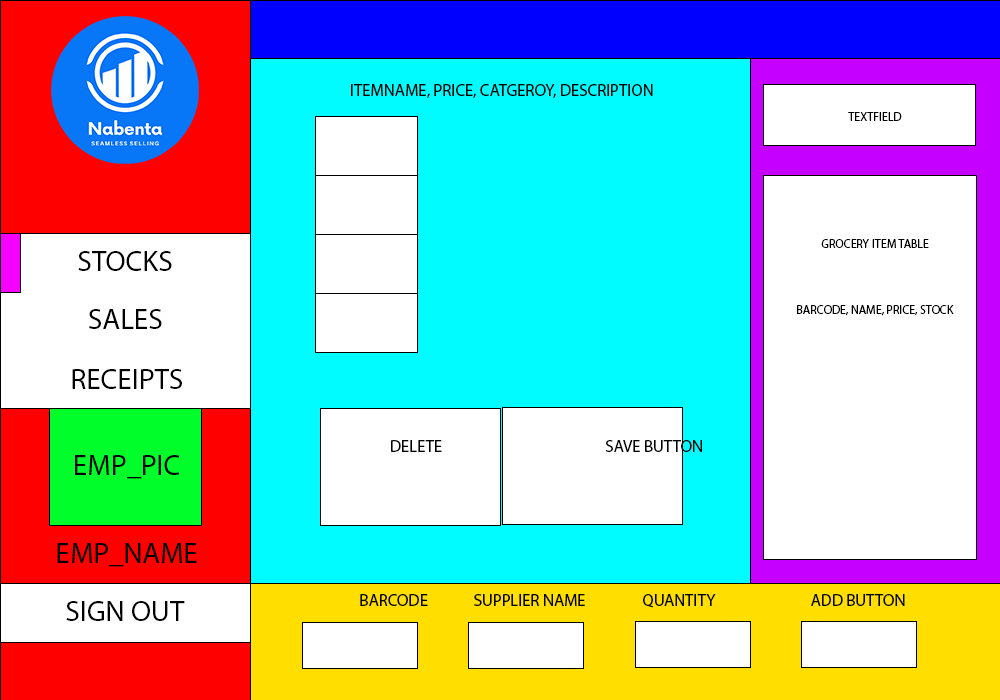
<style>
.page{position:relative;width:1000px;height:700px;background:#ffffff}
.page>*{position:absolute;margin:0}
.t1{font:16.7px "MyriadPro-Regular";color:#000000;text-transform:uppercase}
.t2{font:12px "MyriadPro-Regular";color:#000000;text-transform:uppercase}
.t3{font:12px/65.4px "MyriadPro-Regular";color:#000000;text-transform:uppercase}
.t4{font:29.2px "MyriadPro-Regular";color:#000000;text-transform:uppercase}
</style>
<div class="page">
<p class="t1" style="left:351px;top:84px;width:302px;height:14px">itemName, price, catgeroy, description</p>
<p class="t2" style="left:848px;top:112px;width:54px;height:9px">textfield</p>
<p class="t3" style="left:797px;top:239px;width:157px;height:77px;text-align:center">grocery item table<br>barcode, name, price, stock</p>
<p class="t4" style="left:78px;top:251px;width:94px;height:20px">stocks</p>
<p class="t4" style="left:89px;top:309px;width:73px;height:20px">sales</p>
<p class="t4" style="left:72px;top:369px;width:110px;height:20px">receipts</p>
<p class="t1" style="left:391px;top:440px;width:51px;height:12px">delete</p>
<p class="t1" style="left:605px;top:440px;width:97px;height:12px">save button</p>
<p class="t4" style="left:75px;top:455px;width:105px;height:24px">emp_pic</p>
<p class="t4" style="left:57px;top:543px;width:140px;height:24px">emp_name</p>
<p class="t4" style="left:66px;top:601px;width:119px;height:20px">Sign out</p>
<p class="t1" style="left:360px;top:594px;width:545px;height:14px">barcode             supplier name                quantity                           add button</p>
</div>
